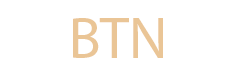
<style>
.page{position:relative;width:230px;height:80px;background:#ffffff}
.page>*{position:absolute;margin:0}
.t1{font:58.3px "MyriadPro-Regular";color:#eac596}
</style>
<div class="page">
<p class="t1" style="left:73px;top:18px;width:90px;height:40px">BTN</p>
</div>
